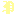
<style>
.page{position:relative;width:16px;height:16px;background:#ffffff}
.page>*{position:absolute;margin:0}
.t1{font:14px "OldEnglishTextMT";letter-spacing:0.111em;color:#fffc9b;font-weight:bold}
</style>
<div class="page">
<p class="t1" style="left:2px;top:1px;width:12px;height:13px">P</p>
</div>
